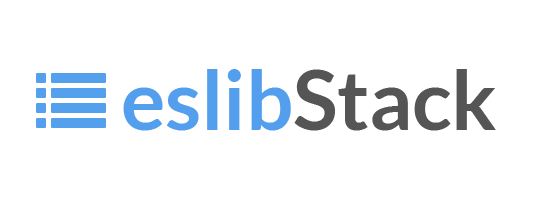
<style>
.page{position:relative;width:550px;height:200px;background:#ffffff}
.page>*{position:absolute;margin:0}
.t1{font:82.5px "Lato-Bold";color:#549fed}
.t2{font:82.5px "Lato-Bold";color:#555555}
</style>
<div class="page">
<p class="t1" style="left:123px;top:69px;width:373px;height:62px">eslib<span class="t2">Stack</span></p>
</div>
